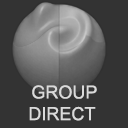
<style>
.page{position:relative;width:128px;height:128px;background:#333333}
.page>*{position:absolute;margin:0}
.t1{font:18px "ArialMT";color:#dadada}
</style>
<div class="page">
<p class="t1" style="left:29px;top:85px;width:68px;height:36px;text-align:center">GROUP <br>DIRECT</p>
</div>
